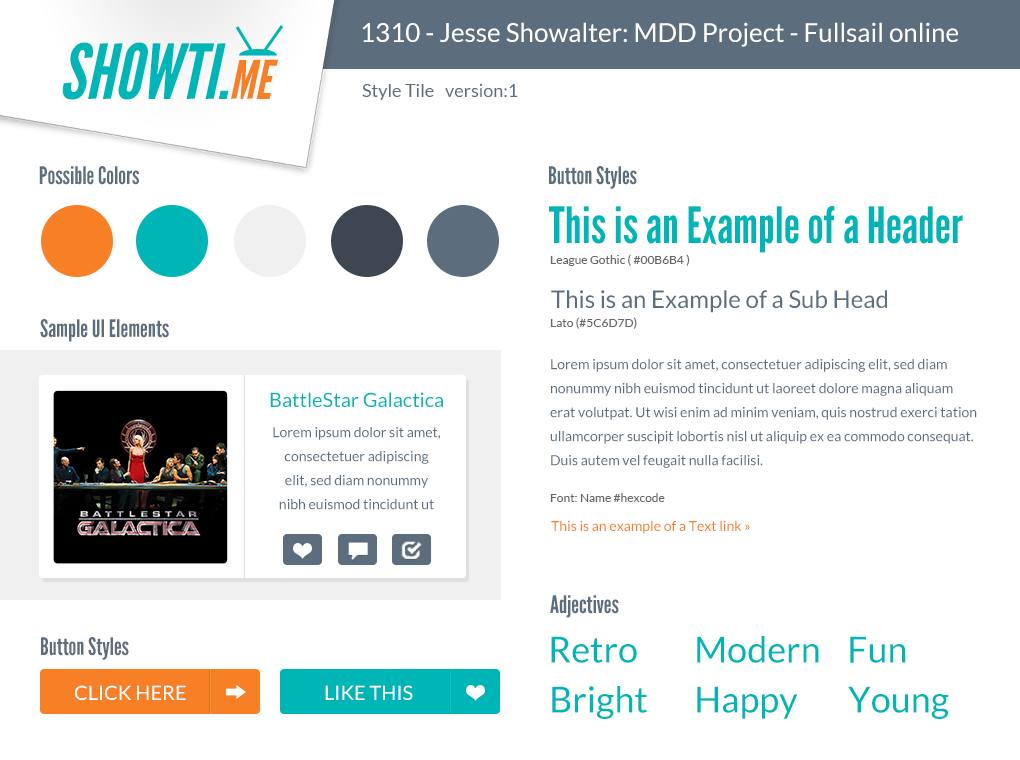
<style>
.page{position:relative;width:1020px;height:760px;background:#ffffff}
.page>*{position:absolute;margin:0}
.t1{font:26px "Lato-Regular";color:#ffffff}
.t2{font:76px "LeagueGothic-Italic";color:#00b5b5;text-transform:uppercase}
.t3{font:76px "LeagueGothic-Italic";color:#f78027;font-variant:small-caps}
.t4{font:18px "Lato-Regular";color:#5c6d7e}
.t5{font:24px "LeagueGothic-Regular";color:#5c6d7e}
.t6{font:50px "LeagueGothic-Regular";color:#00b5b5}
.t7{font:12px "Lato-Regular";color:#666666}
.t8{font:24px "Lato-Regular";color:#5c6d7e}
.t9{font:14px/24px "Lato-Regular";color:#5c6d7e}
.t10{font:20px "Lato-Regular";color:#00b5b5}
.t11{font:14px "Lato-Regular";color:#f78027}
.t12{font:36px "Lato-Regular";color:#00b5b5}
.t13{font:20px "Lato-Regular";color:#ffffff;text-transform:uppercase}
</style>
<div class="page">
<p class="t1" style="left:362px;top:22px;width:596px;height:25px">1310 - Jesse Showalter: MDD Project - Fullsail online</p>
<p class="t2" style="left:62px;top:42px;width:216px;height:58px">Showti.<span class="t3">me</span></p>
<p class="t4" style="left:362px;top:84px;width:72px;height:16px">Style Tile</p>
<p class="t4" style="left:445px;top:83px;width:73px;height:14px">version:1</p>
<p class="t5" style="left:39px;top:166px;width:100px;height:19px">Possible Colors</p>
<p class="t5" style="left:549px;top:166px;width:88px;height:23px">Button Styles</p>
<p class="t6" style="left:549px;top:206px;width:414px;height:47px">This is an Example of a Header</p>
<p class="t7" style="left:550px;top:254px;width:140px;height:12px">League Gothic ( #00B6B4 )</p>
<p class="t8" style="left:551px;top:290px;width:336px;height:23px">This is an Example of a Sub Head</p>
<p class="t7" style="left:550px;top:317px;width:87px;height:12px">Lato (#5C6D7D)</p>
<p class="t5" style="left:40px;top:319px;width:129px;height:23px">Sample UI Elements</p>
<p class="t9" style="left:550px;top:359px;width:427px;height:109px">Lorem ipsum dolor sit amet, consectetuer adipiscing elit, sed diam nonummy nibh euismod tincidunt ut laoreet dolore magna aliquam erat volutpat. Ut wisi enim ad minim veniam, quis nostrud exerci tation ullamcorper suscipit lobortis nisl ut aliquip ex ea commodo consequat. Duis autem vel feugait nulla facilisi.</p>
<p class="t10" style="left:270px;top:392px;width:173px;height:15px">BattleStar Galactica</p>
<p class="t9" style="left:273px;top:427px;width:167px;height:83px;text-align:center">Lorem ipsum dolor sit amet, consectetuer adipiscing elit, sed diam nonummy nibh euismod tincidunt ut laoreet dolore magna aliquam erat volutpat.</p>
<p class="t7" style="left:550px;top:493px;width:115px;height:9px">Font: Name #hexcode</p>
<p class="t11" style="left:551px;top:520px;width:199px;height:14px">This is an example of a Text link »</p>
<p class="t5" style="left:550px;top:595px;width:69px;height:23px">Adjectives</p>
<p class="t5" style="left:41px;top:637px;width:88px;height:23px">Button Styles</p>
<p class="t12" style="left:551px;top:636px;width:86px;height:27px">Retro</p>
<p class="t12" style="left:697px;top:636px;width:122px;height:27px">Modern</p>
<p class="t12" style="left:850px;top:636px;width:56px;height:27px">Fun</p>
<p class="t13" style="left:75px;top:685px;width:111px;height:15px">Click Here</p>
<p class="t13" style="left:325px;top:685px;width:88px;height:15px">Like this</p>
<p class="t12" style="left:552px;top:686px;width:95px;height:33px">Bright</p>
<p class="t12" style="left:697px;top:686px;width:101px;height:33px">Happy</p>
<p class="t12" style="left:848px;top:686px;width:101px;height:33px">Young</p>
</div>
